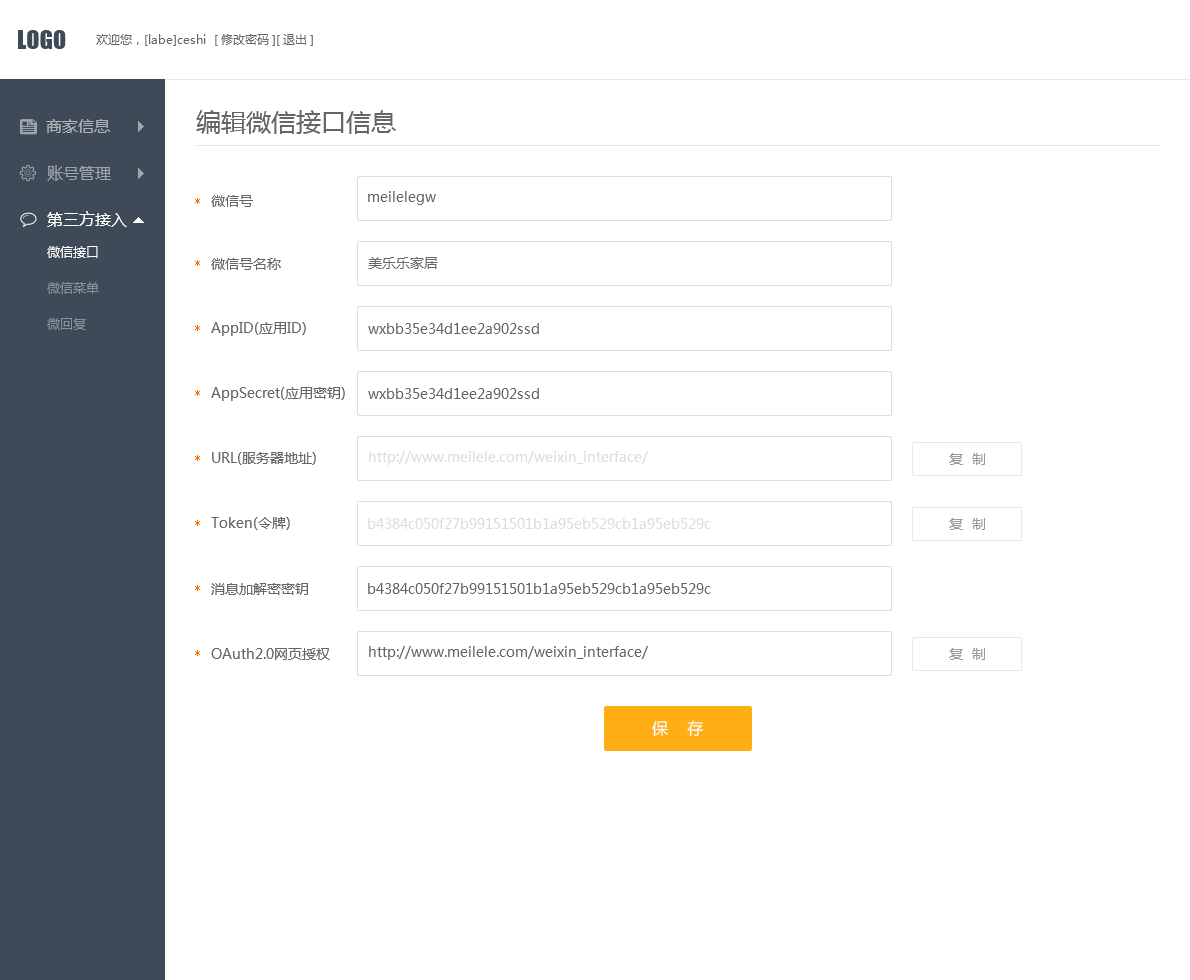
<style>
.page{position:relative;width:1190px;height:980px;background:#ffffff}
.page>*{position:absolute;margin:0}
.t1{font:24px "Impact";color:#3f4a59}
.t2{font:12px "MicrosoftYaHei";color:#666666}
.t3{font:25px "MicrosoftYaHei";color:#666666}
.t4{font:16px "MicrosoftYaHei";color:#b0b4b8}
.t5{font:16px "MicrosoftYaHei";color:#9fa5ac}
.t6{font:12px "SimSun";color:#ff6600}
.t7{font:14px "MicrosoftYaHei";color:#666666}
.t8{font:16px "MicrosoftYaHei";color:#ffffff}
.t9{font:13px/18px "MicrosoftYaHei";color:#87929a}
.t10{font:13px/18px "MicrosoftYaHei";color:#ffffff}
.t11{font:14px "MicrosoftYaHei";color:#dddddd}
.t12{font:14px "MicrosoftYaHei";letter-spacing:0.65em;color:#999999}
.t13{font:16px "MicrosoftYaHei";letter-spacing:1.199em;color:#ffffff}
</style>
<div class="page">
<p class="t1" style="left:18px;top:30px;width:48px;height:19px">LOGO</p>
<p class="t2" style="left:96px;top:34px;width:217px;height:12px">欢迎您，[labe]ceshi  [修改密码][退出]</p>
<p class="t3" style="left:196px;top:110px;width:200px;height:24px">编辑微信接口信息</p>
<p class="t4" style="left:46px;top:119px;width:64px;height:14px">商家信息</p>
<p class="t5" style="left:47px;top:165px;width:64px;height:16px">账号管理</p>
<p class="t6" style="left:195px;top:198px;width:5px;height:6px">*</p>
<p class="t7" style="left:211px;top:195px;width:42px;height:12px">微信号</p>
<p class="t7" style="left:368px;top:191px;width:68px;height:14px">meilelegw</p>
<p class="t8" style="left:47px;top:211px;width:80px;height:16px">第三方接入</p>
<p class="t9" style="left:47px;top:246px;width:52px;height:84px"><span class="t10">微信接口<br></span><br>微信菜单<br><br>微回复</p>
<p class="t7" style="left:368px;top:257px;width:70px;height:12px">美乐乐家居</p>
<p class="t6" style="left:195px;top:260px;width:5px;height:6px">*</p>
<p class="t7" style="left:211px;top:258px;width:70px;height:12px">微信号名称</p>
<p class="t6" style="left:195px;top:325px;width:5px;height:6px">*</p>
<p class="t7" style="left:211px;top:322px;width:95px;height:14px">AppID(应用ID)</p>
<p class="t7" style="left:368px;top:323px;width:171px;height:11px">wxbb35e34d1ee2a902ssd</p>
<p class="t6" style="left:195px;top:390px;width:5px;height:6px">*</p>
<p class="t7" style="left:211px;top:387px;width:134px;height:14px">AppSecret(应用密钥)</p>
<p class="t7" style="left:368px;top:388px;width:171px;height:11px">wxbb35e34d1ee2a902ssd</p>
<p class="t6" style="left:195px;top:455px;width:5px;height:6px">*</p>
<p class="t7" style="left:212px;top:452px;width:104px;height:13px">URL(服务器地址)</p>
<p class="t11" style="left:369px;top:451px;width:279px;height:14px">http://www.meilele.com/weixin_interface/</p>
<p class="t12" style="left:949px;top:453px;width:36px;height:12px">复制</p>
<p class="t6" style="left:195px;top:520px;width:5px;height:6px">*</p>
<p class="t7" style="left:211px;top:517px;width:79px;height:13px">Token(令牌)</p>
<p class="t11" style="left:368px;top:518px;width:343px;height:11px">b4384c050f27b99151501b1a95eb529cb1a95eb529c</p>
<p class="t12" style="left:949px;top:518px;width:36px;height:12px">复制</p>
<p class="t6" style="left:195px;top:585px;width:5px;height:6px">*</p>
<p class="t7" style="left:211px;top:583px;width:97px;height:12px">消息加解密密钥</p>
<p class="t7" style="left:368px;top:583px;width:343px;height:11px">b4384c050f27b99151501b1a95eb529cb1a95eb529c</p>
<p class="t6" style="left:195px;top:650px;width:5px;height:6px">*</p>
<p class="t7" style="left:211px;top:648px;width:119px;height:12px">OAuth2.0网页授权</p>
<p class="t7" style="left:369px;top:646px;width:279px;height:14px">http://www.meilele.com/weixin_interface/</p>
<p class="t12" style="left:949px;top:648px;width:36px;height:12px">复制</p>
<p class="t13" style="left:652px;top:720px;width:51px;height:17px">保存</p>
</div>
